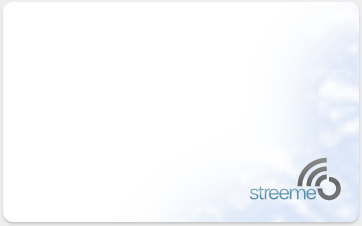
<style>
.page{position:relative;width:362px;height:226px;background:#ffffff}
.page>*{position:absolute;margin:0}
.t1{font:19.7px "Kalinga"}
</style>
<div class="page">
<p class="t1" style="left:249px;top:186px;width:67px;height:14px">streeme</p>
</div>
